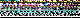
<style>
.page{position:relative;width:80px;height:18px}
.page>*{position:absolute;margin:0}
.t1{font:15.4px "MrsEavesItalic";scale:0.96 1}
</style>
<div class="page">
<p class="t1" style="left:0px;top:3px;width:78px;height:11px">Nohana Sealund</p>
</div>
